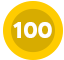
<style>
.page{position:relative;width:64px;height:60px;background:#ffffff}
.page>*{position:absolute;margin:0}
.t1{font:22px "MADETOMMY-Bold";color:#ffffff}
</style>
<div class="page">
<p class="t1" style="left:13px;top:22px;width:39px;height:16px">100</p>
</div>
